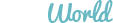
<style>
.page{position:relative;width:113px;height:23px;background:#ffffff}
.page>*{position:absolute;margin:0}
.t1{font:24px "Pacifico";color:#68b9c4}
.t2{font:24px "Pacifico";color:#ffffff}
</style>
<div class="page">
<p class="t1" style="left:0px;top:0px;width:113px;height:23px"><span class="t2">Web</span>World</p>
</div>
